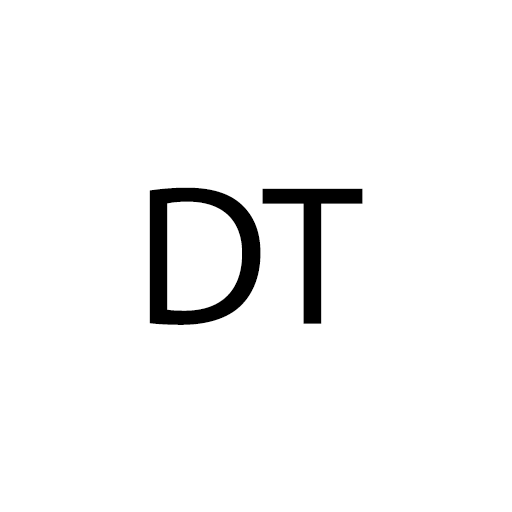
<style>
.page{position:relative;width:512px;height:512px;background:#ffffff}
.page>*{position:absolute;margin:0}
.t1{font:200px "MyriadPro-Regular";color:#000000}
</style>
<div class="page">
<p class="t1" style="left:149px;top:187px;width:214px;height:138px">DT</p>
</div>
